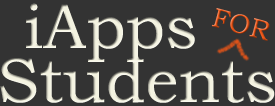
<style>
.page{position:relative;width:275px;height:106px;background:#333333}
.page>*{position:absolute;margin:0}
.t1{font:63.4px "BookmanOldStyle";color:#f4f3e1}
.t2{font:27.2px "BookmanOldStyle"}
</style>
<div class="page">
<p class="t1" style="left:26px;top:3px;width:169px;height:59px">iApps</p>
<p class="t2" style="left:211px;top:8px;width:59px;height:33px;rotate:15deg">FOR</p>
<p class="t1" style="left:0px;top:56px;width:275px;height:47px">Students</p>
</div>
